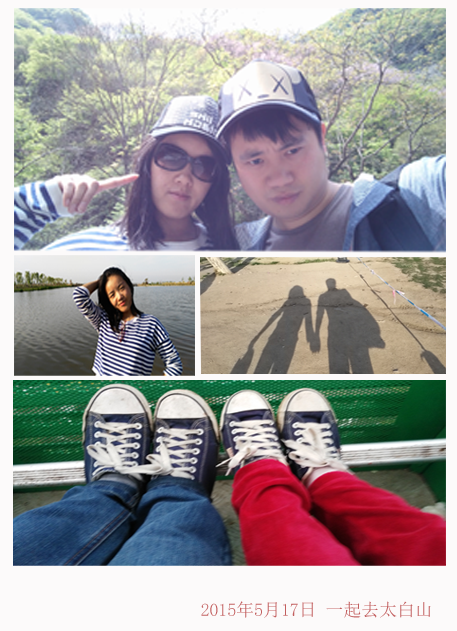
<style>
.page{position:relative;width:457px;height:631px}
.page>*{position:absolute;margin:0}
.t1{font:17.9px "NSimSun";color:#c25e5e}
.t2{font:17.9px "SimSun";color:#c25e5e}
</style>
<div class="page">
<p class="t1" style="left:201px;top:601px;width:230px;height:17px"><span class="t2">‎</span>2015年5月17日 一起去太白山</p>
</div>
